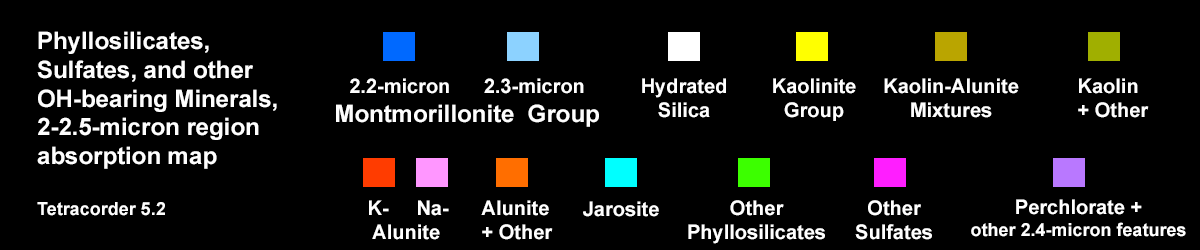
<style>
.page{position:relative;width:1200px;height:250px;background:#000000}
.page>*{position:absolute;margin:0}
.t1{font:24px "Arial-BoldMT";color:#fefefe}
.t2{font:18px "Arial-BoldMT";color:#fefefe}
.t3{font:20px "Arial-BoldMT";color:#fefefe}
.t4{font:20px "Arial-BoldMT";color:#ffffff}
.t5{font:18px "Arial-BoldMT";color:#ffffff}
</style>
<div class="page">
<p class="t1" style="left:37px;top:31px;width:240px;height:185px">Phyllosilicates,<br>Sulfates, and other<br>OH-bearing Minerals, <br>2-2.5-micron region <br>absorption map<br><br><span class="t2">Tetracorder 5.2</span></p>
<p class="t3" style="left:336px;top:78px;width:263px;height:49px;text-align:center">2.2-micron      2.3-micron<br><span class="t1">Montmorillonite  Group</span></p>
<p class="t3" style="left:642px;top:78px;width:84px;height:40px;text-align:center">Hydrated<br>Silica</p>
<p class="t3" style="left:773px;top:78px;width:83px;height:43px;text-align:center">Kaolinite<br>Group</p>
<p class="t3" style="left:884px;top:78px;width:135px;height:40px;text-align:center">Kaolin-Alunite<br>Mixtures</p>
<p class="t3" style="left:1078px;top:78px;width:71px;height:40px">Kaolin<br>+ Other</p>
<p class="t4" style="left:369px;top:200px;width:80px;height:40px">K-     Na-<br> Alunite</p>
<p class="t4" style="left:481px;top:200px;width:72px;height:40px">Alunite<br>+ Other</p>
<p class="t3" style="left:583px;top:201px;width:76px;height:16px">Jarosite</p>
<p class="t4" style="left:688px;top:200px;width:137px;height:44px;text-align:center">Other<br>Phyllosilicates</p>
<p class="t4" style="left:855px;top:200px;width:77px;height:40px;text-align:center">Other<br>Sulfates</p>
<p class="t5" style="left:971px;top:199px;width:215px;height:38px;text-align:center"><span class="t4">Perchlorate +<br></span>other 2.4-micron features</p>
</div>
